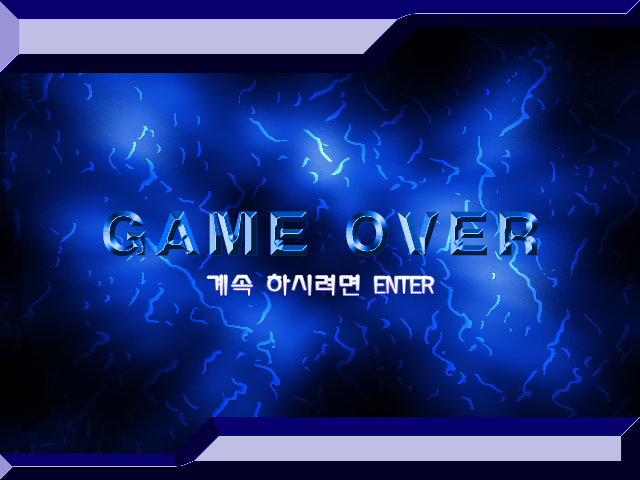
<style>
.page{position:relative;width:640px;height:480px}
.page>*{position:absolute;margin:0}
.t1{font:60px "Seoul-Big"}
.t2{font:24px "HiTelSupBase";color:#ffffff}
</style>
<div class="page">
<p class="t1" style="left:103px;top:211px;width:436px;height:46px">GAME OVER</p>
<p class="t2" style="left:207px;top:274px;width:227px;height:22px">계속 하시려면 ENTER</p>
</div>
